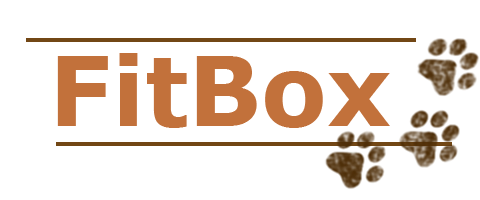
<style>
.page{position:relative;width:480px;height:200px;background:#ffffff}
.page>*{position:absolute;margin:0}
.t1{font:96px "Verdana-Bold";color:#c2713b}
</style>
<div class="page">
<p class="t1" style="left:57px;top:53px;width:333px;height:75px">FitBox</p>
</div>
